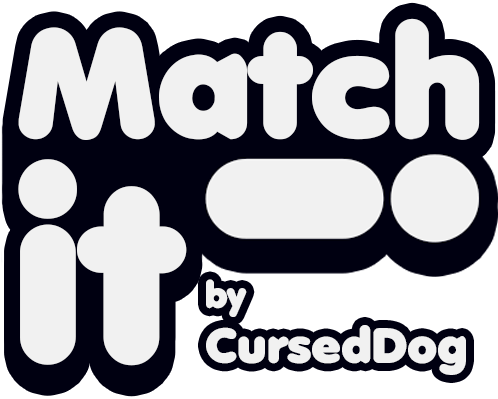
<style>
.page{position:relative;width:498px;height:399px;background:#f1f1f1}
.page>*{position:absolute;margin:0}
.t1{font:150px "Anja-Eliane-Nornal";color:#f1f1f1}
.t2{font:250px "Anja-Eliane-Nornal";color:#f1f1f1}
</style>
<div class="page">
<p class="t1" style="left:18px;top:26px;width:462px;height:122px">Match</p>
<p class="t1" style="left:18px;top:18px;width:462px;height:122px">Match</p>
<p class="t2" style="left:18px;top:159px;width:169px;height:207px">it</p>
<p class="t2" style="left:18px;top:174px;width:169px;height:207px">it</p>
</div>
